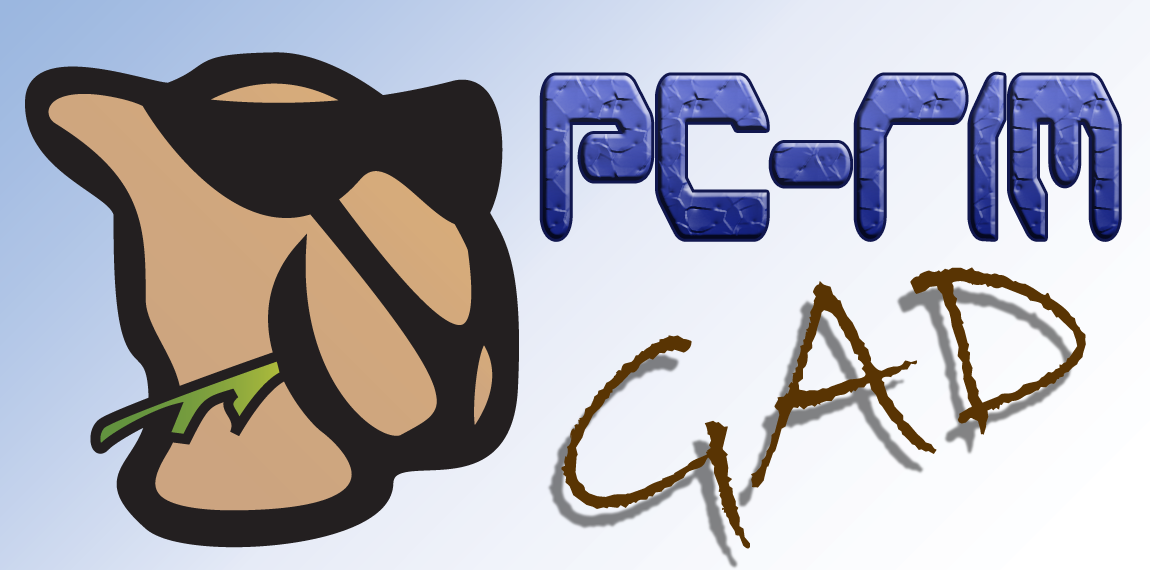
<style>
.page{position:relative;width:1150px;height:570px}
.page>*{position:absolute;margin:0}
.t1{font:225.8px "AirstripOneBold";scale:0.58 1}
.t2{font:323.9px "BradleyHandITC";color:#593403;scale:0.85 1}
</style>
<div class="page">
<p class="t1" style="left:542px;top:74px;width:577px;height:165px">PC-RIM</p>
<p class="t2" style="left:561px;top:267px;width:525px;height:282px;rotate:-14deg">GAD</p>
</div>
